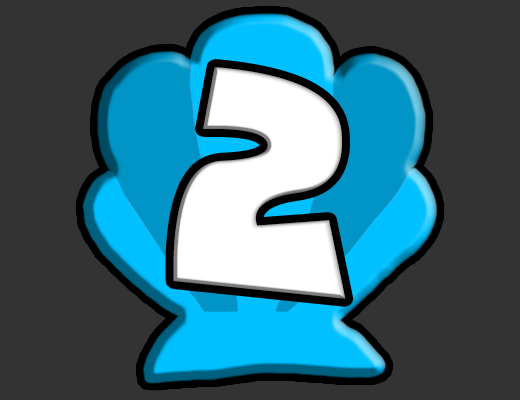
<style>
.page{position:relative;width:520px;height:400px;background:#333333}
.page>*{position:absolute;margin:0}
.t1{font:279.4px "Funhouse";color:#ffffff}
</style>
<div class="page">
<p class="t1" style="left:173px;top:67px;width:173px;height:232px">2</p>
</div>
